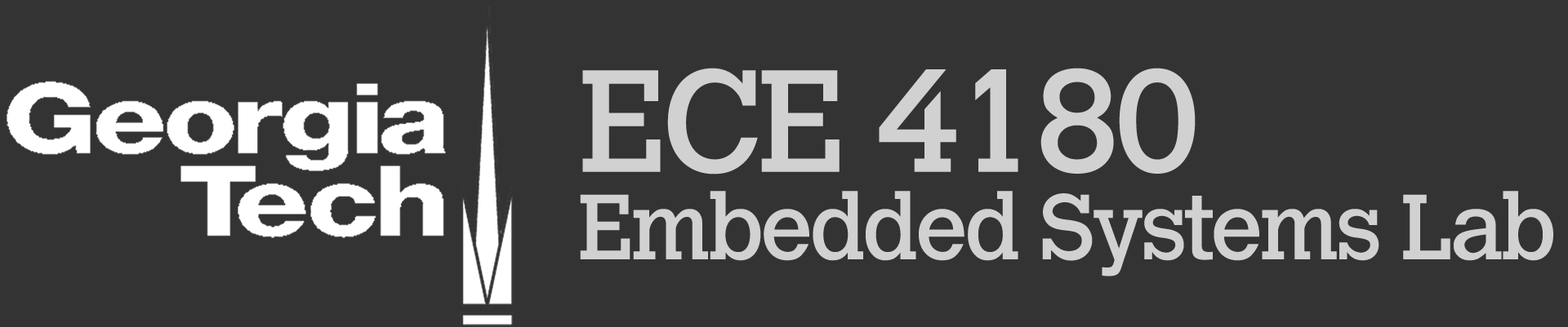
<style>
.page{position:relative;width:1568px;height:327px;background:#333333}
.page>*{position:absolute;margin:0}
.t1{font:144.1px "CalvertMT";letter-spacing:-0.04em;color:#d2d1d1}
.t2{font:91.5px "CalvertMT";letter-spacing:-0.04em;color:#d2d1d1}
</style>
<div class="page">
<p class="t1" style="left:582px;top:68px;width:614px;height:107px">ECE 4180</p>
<p class="t2" style="left:580px;top:191px;width:973px;height:86px">Embedded Systems Lab</p>
</div>
